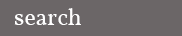
<style>
.page{position:relative;width:182px;height:36px;background:#6b6667}
.page>*{position:absolute;margin:0}
.t1{font:24px "Vollkorn-Regular";color:#ffffff}
</style>
<div class="page">
<p class="t1" style="left:14px;top:8px;width:67px;height:17px">search</p>
</div>
